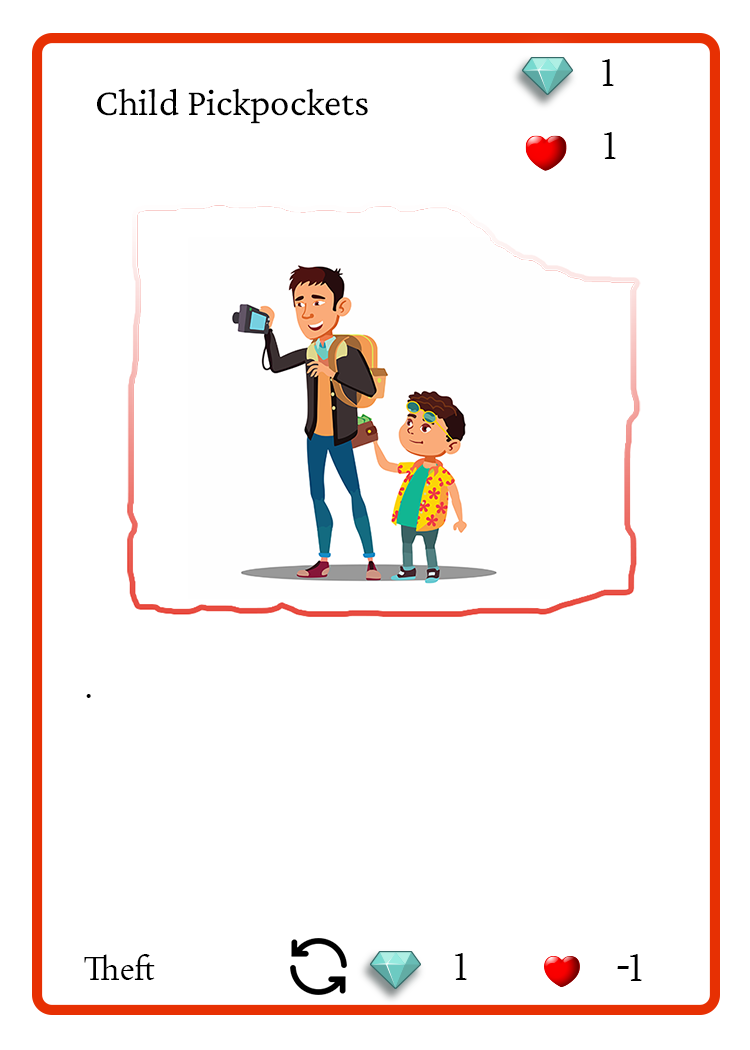
<style>
.page{position:relative;width:750px;height:1050px;background:#ffffff}
.page>*{position:absolute;margin:0}
.t1{font:37.5px "Joan-Regular";color:#000000;text-transform:uppercase}
.t2{font:38.9px "CrimsonPro-Regular";color:#000000}
.t3{font:33.3px "Joan-Regular";color:#000000}
</style>
<div class="page">
<p class="t1" style="left:602px;top:59px;width:12px;height:27px">1</p>
<p class="t2" style="left:97px;top:88px;width:271px;height:36px">Child Pickpockets</p>
<p class="t1" style="left:604px;top:132px;width:12px;height:27px">1</p>
<p class="t3" style="left:86px;top:694px;width:5px;height:4px">.</p>
<p class="t1" style="left:455px;top:953px;width:12px;height:27px">1</p>
<p class="t3" style="left:84px;top:954px;width:71px;height:26px">Theft</p>
<p class="t1" style="left:617px;top:954px;width:25px;height:27px">-1</p>
</div>
